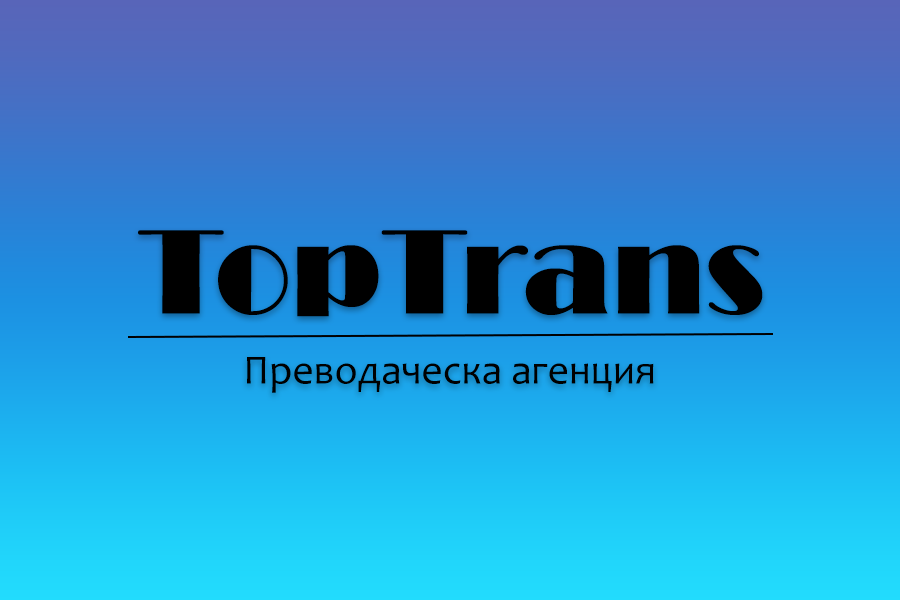
<style>
.page{position:relative;width:900px;height:600px}
.page>*{position:absolute;margin:0}
.t1{font:125px "Broadway";color:#000000}
.t2{font:41.7px "Candara";color:#000000}
</style>
<div class="page">
<p class="t1" style="left:138px;top:230px;width:625px;height:87px">TopTrans</p>
<p class="t2" style="left:247px;top:357px;width:407px;height:36px">Преводаческа агенция</p>
</div>
